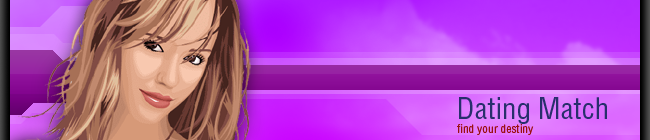
<style>
.page{position:relative;width:650px;height:140px}
.page>*{position:absolute;margin:0}
.t1{font:12px/14px "HeliosCond";color:#9b1111}
.t2{font:30px/14px "HeliosCond";color:#282f6c}
</style>
<div class="page">
<p class="t1" style="left:457px;top:97px;width:150px;height:38px"><span class="t2">Dating Match<br></span>find your destiny</p>
</div>
